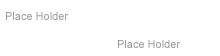
<style>
.page{position:relative;width:220px;height:56px;background:#ffffff}
.page>*{position:absolute;margin:0}
.t1{font:11px "ArialMT";color:#9c9c9c}
</style>
<div class="page">
<p class="t1" style="left:6px;top:12px;width:63px;height:8px">Place Holder</p>
<p class="t1" style="left:118px;top:40px;width:63px;height:8px">Place Holder</p>
</div>
